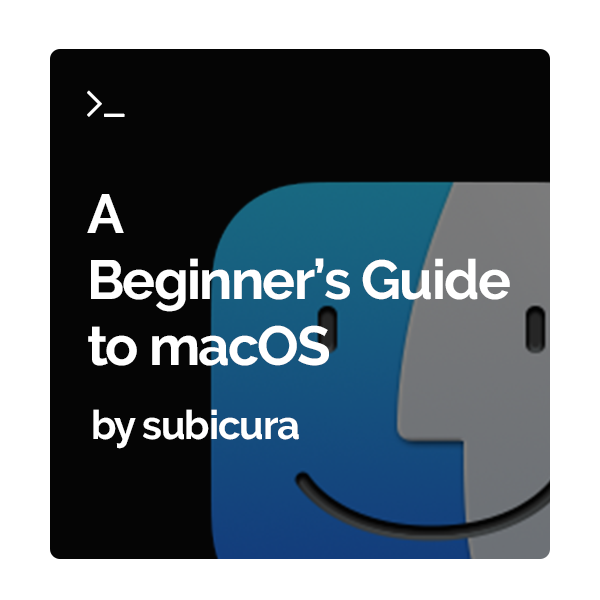
<style>
.page{position:relative;width:600px;height:600px;background:#050505}
.page>*{position:absolute;margin:0}
.t1{font:55px "Raleway-Bold";letter-spacing:-0.03em;color:#ffffff}
.t2{font:40px "Raleway-Bold";letter-spacing:-0.03em;color:#ffffff}
</style>
<div class="page">
<p class="t1" style="left:87px;top:194px;width:423px;height:172px">A<br>Beginner’s Guide<br>to macOS</p>
<p class="t2" style="left:93px;top:409px;width:206px;height:40px">by subicura</p>
</div>
